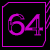
<style>
.page{position:relative;width:50px;height:50px;background:#000000}
.page>*{position:absolute;margin:0}
.t1{font:25px "ABitEmpty";color:#cc00cc}
</style>
<div class="page">
<p class="t1" style="left:8px;top:13px;width:35px;height:23px">64</p>
</div>
